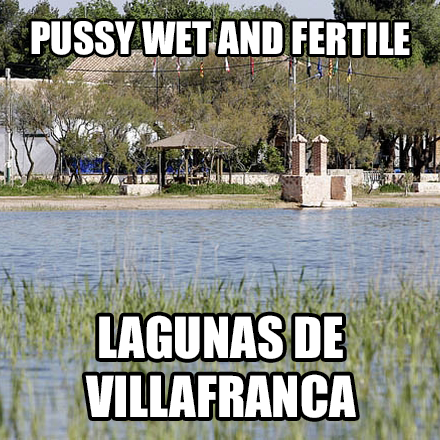
<style>
.page{position:relative;width:440px;height:440px}
.page>*{position:absolute;margin:0}
.t1{font:41.1px "Impact";color:#ffffff}
.t2{font:52.3px "Impact";color:#ffffff}
</style>
<div class="page">
<p class="t1" style="left:31px;top:21px;width:379px;height:34px">PUSSY WET AND FERTILE</p>
<p class="t2" style="left:85px;top:315px;width:271px;height:103px;text-align:center">LAGUNAS DE<br>VILLAFRANCA</p>
</div>
